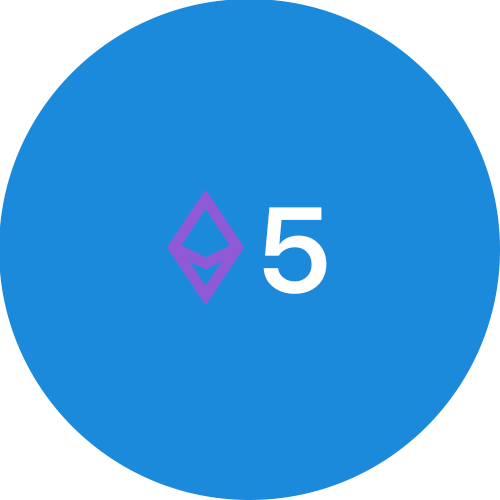
<style>
.page{position:relative;width:500px;height:500px;background:#1c8adb}
.page>*{position:absolute;margin:0}
.t1{font:120px "SFProDisplay-Semibold";color:#ffffff}
</style>
<div class="page">
<p class="t1" style="left:263px;top:207px;width:64px;height:87px">5</p>
</div>
